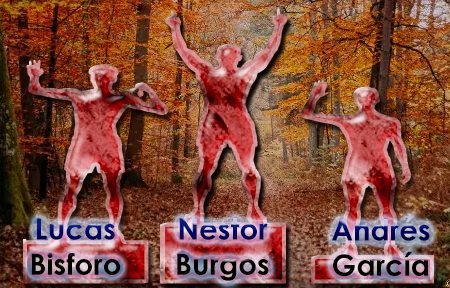
<style>
.page{position:relative;width:450px;height:288px}
.page>*{position:absolute;margin:0}
.t1{font:29.3px "CenturyGothic-Bold"}
</style>
<div class="page">
<p class="t1" style="left:31px;top:218px;width:90px;height:57px;text-align:center">Lucas<br>Bisforo</p>
<p class="t1" style="left:177px;top:218px;width:92px;height:63px;text-align:center">Nestor <br>Burgos</p>
<p class="t1" style="left:332px;top:216px;width:98px;height:61px;text-align:center">Andrés García</p>
</div>
